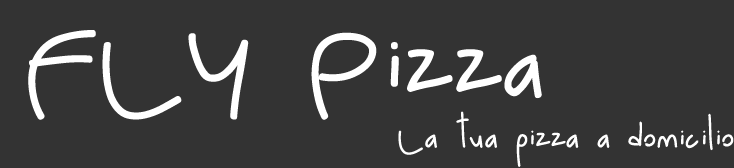
<style>
.page{position:relative;width:734px;height:168px;background:#333333}
.page>*{position:absolute;margin:0}
.t1{font:35px "luna-Regular";color:#ffffff}
</style>
<div class="page">
<p class="t1" style="left:398px;top:111px;width:336px;height:56px">La tua pizza a domicilio</p>
</div>
